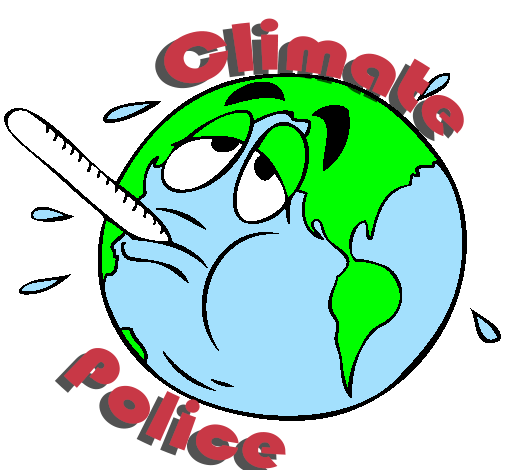
<style>
.page{position:relative;width:505px;height:470px;background:#ffffff}
.page>*{position:absolute;margin:0}
.t1{font:72px "Bauhaus93";color:#c83846}
</style>
<div class="page">
<p class="t1" style="left:164px;top:18px;width:300px;height:119px;rotate:11deg">Climate</p>
<p class="t1" style="left:63px;top:348px;width:223px;height:121px;rotate:23deg">Police</p>
</div>
